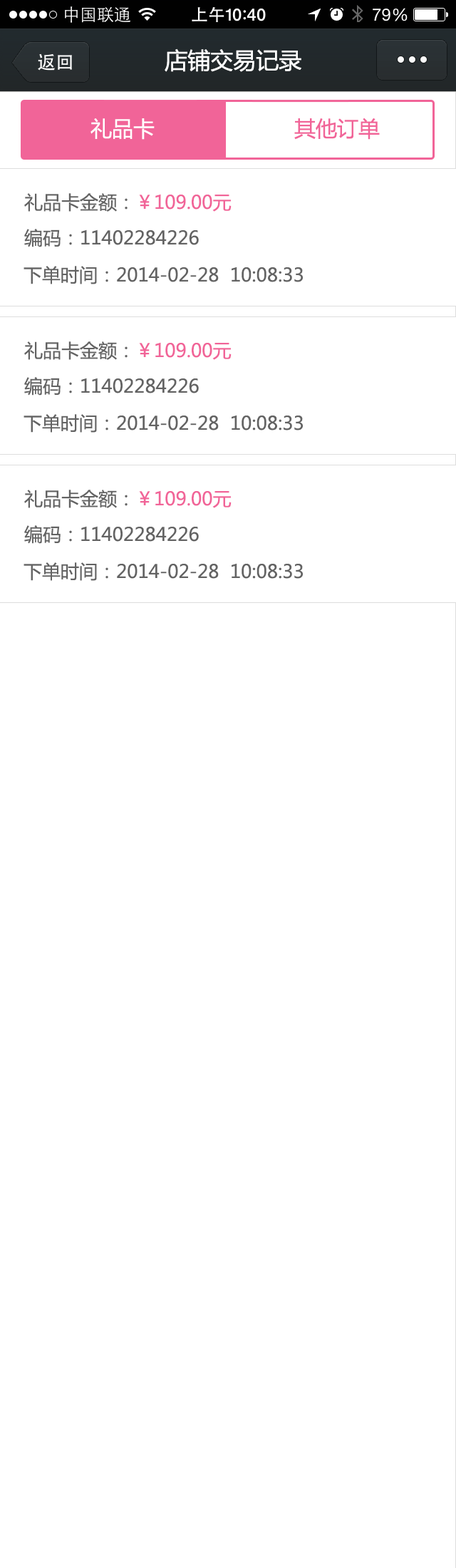
<style>
.page{position:relative;width:456px;height:1568px;background:#ffffff}
.page>*{position:absolute;margin:0}
.t1{font:22.8px "MicrosoftYaHei";color:#ffffff}
.t2{font:21.4px "MicrosoftYaHei";color:#ffffff}
.t3{font:21.4px "MicrosoftYaHei";color:#f16498}
.t4{font:18.5px "MicrosoftYaHei";color:#f16498}
.t5{font:18.5px "MicrosoftYaHei";color:#636363}
</style>
<div class="page">
<p class="t1" style="left:165px;top:48px;width:136px;height:24px">店铺交易记录</p>
<p class="t2" style="left:91px;top:118px;width:64px;height:22px">礼品卡</p>
<p class="t3" style="left:294px;top:118px;width:86px;height:22px">其他订单</p>
<p class="t4" style="left:24px;top:193px;width:208px;height:19px"><span class="t5">礼品卡金额：</span>￥109.00元</p>
<p class="t5" style="left:24px;top:229px;width:175px;height:18px">编码：11402284226</p>
<p class="t5" style="left:24px;top:266px;width:279px;height:18px">下单时间：2014-02-28  10:08:33</p>
<p class="t4" style="left:24px;top:341px;width:208px;height:19px"><span class="t5">礼品卡金额：</span>￥109.00元</p>
<p class="t5" style="left:24px;top:377px;width:175px;height:19px">编码：11402284226</p>
<p class="t5" style="left:24px;top:414px;width:279px;height:19px">下单时间：2014-02-28  10:08:33</p>
<p class="t4" style="left:24px;top:490px;width:208px;height:18px"><span class="t5">礼品卡金额：</span>￥109.00元</p>
<p class="t5" style="left:24px;top:525px;width:175px;height:19px">编码：11402284226</p>
<p class="t5" style="left:24px;top:562px;width:279px;height:19px">下单时间：2014-02-28  10:08:33</p>
</div>
